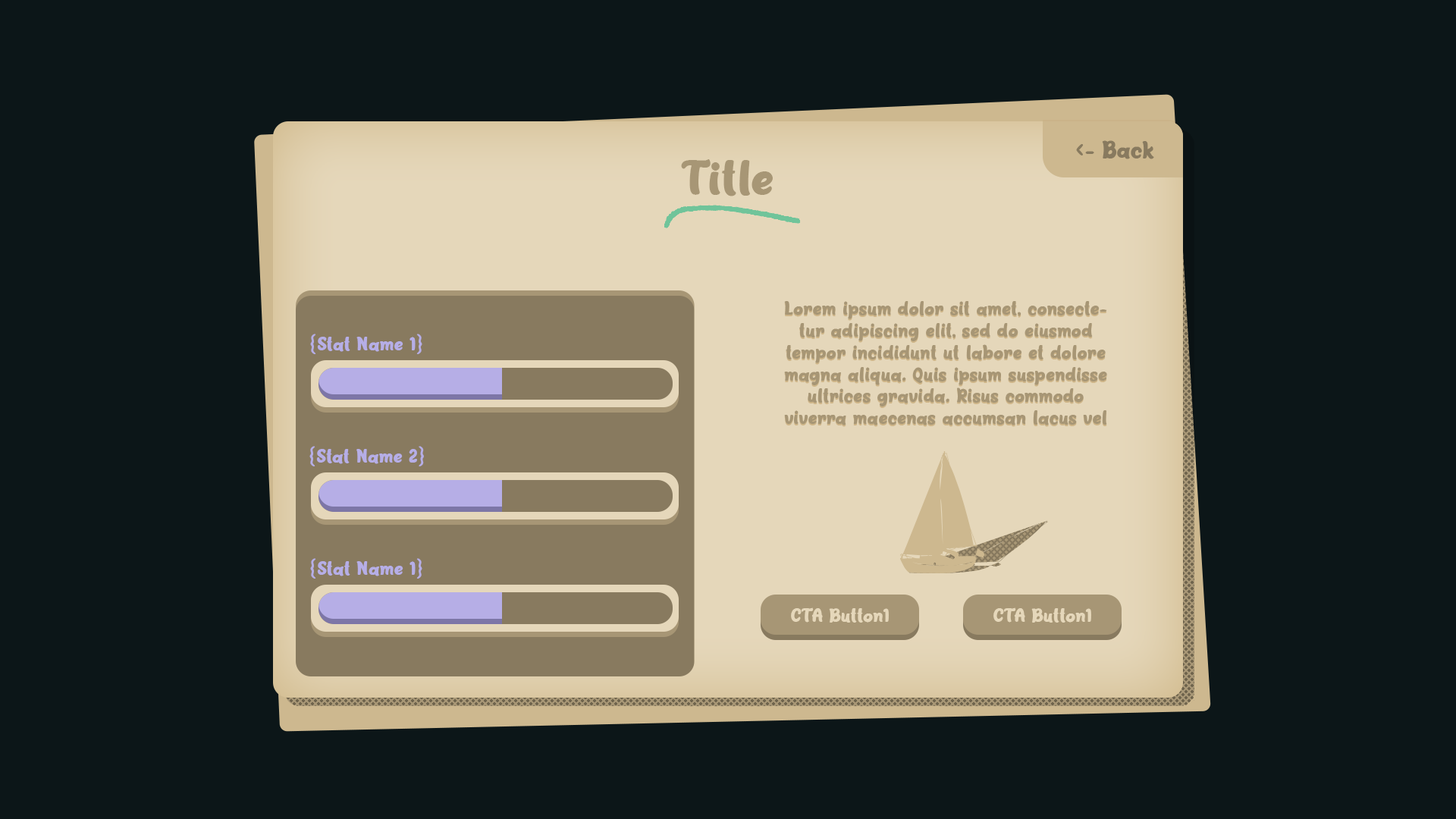
<style>
.page{position:relative;width:1456px;height:819px;background:#0c1618}
.page>*{position:absolute;margin:0}
.t1{font:22.7px "ChocolateCookies";color:#887a5f}
.t2{font:45.5px "ChocolateCookies";color:#a79675}
.t3{font:18.2px "ChocolateCookies";color:#a79675}
.t4{font:18.2px "ChocolateCookies";color:#b6aee6}
.t5{font:18.2px "ChocolateCookies";color:#e5d7ba}
</style>
<div class="page">
<p class="t1" style="left:1076px;top:140px;width:78px;height:19px">&lt;- Back</p>
<p class="t2" style="left:681px;top:159px;width:92px;height:37px">Title</p>
<p class="t3" style="left:784px;top:301px;width:323px;height:124px;text-align:center">Lorem ipsum dolor sit amet, consectetur adipiscing elit, sed do eiusmod tempor incididunt ut labore et dolore magna aliqua. Quis ipsum suspendisse ultrices gravida. Risus commodo viverra maecenas accumsan lacus vel facilisis.</p>
<p class="t4" style="left:310px;top:334px;width:112px;height:20px">{Stat Name 1}</p>
<p class="t4" style="left:309px;top:446px;width:115px;height:20px">{Stat Name 2}</p>
<p class="t4" style="left:310px;top:558px;width:112px;height:21px">{Stat Name 1}</p>
<p class="t5" style="left:791px;top:607px;width:98px;height:16px">CTA Button1</p>
<p class="t5" style="left:993px;top:607px;width:98px;height:16px">CTA Button1</p>
</div>
